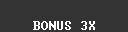
<style>
.page{position:relative;width:128px;height:32px;background:#333333}
.page>*{position:absolute;margin:0}
.t1{font:12px "Terminal";color:#ffffff}
</style>
<div class="page">
<p class="t1" style="left:33px;top:21px;width:62px;height:9px">BONUS 3X</p>
</div>
